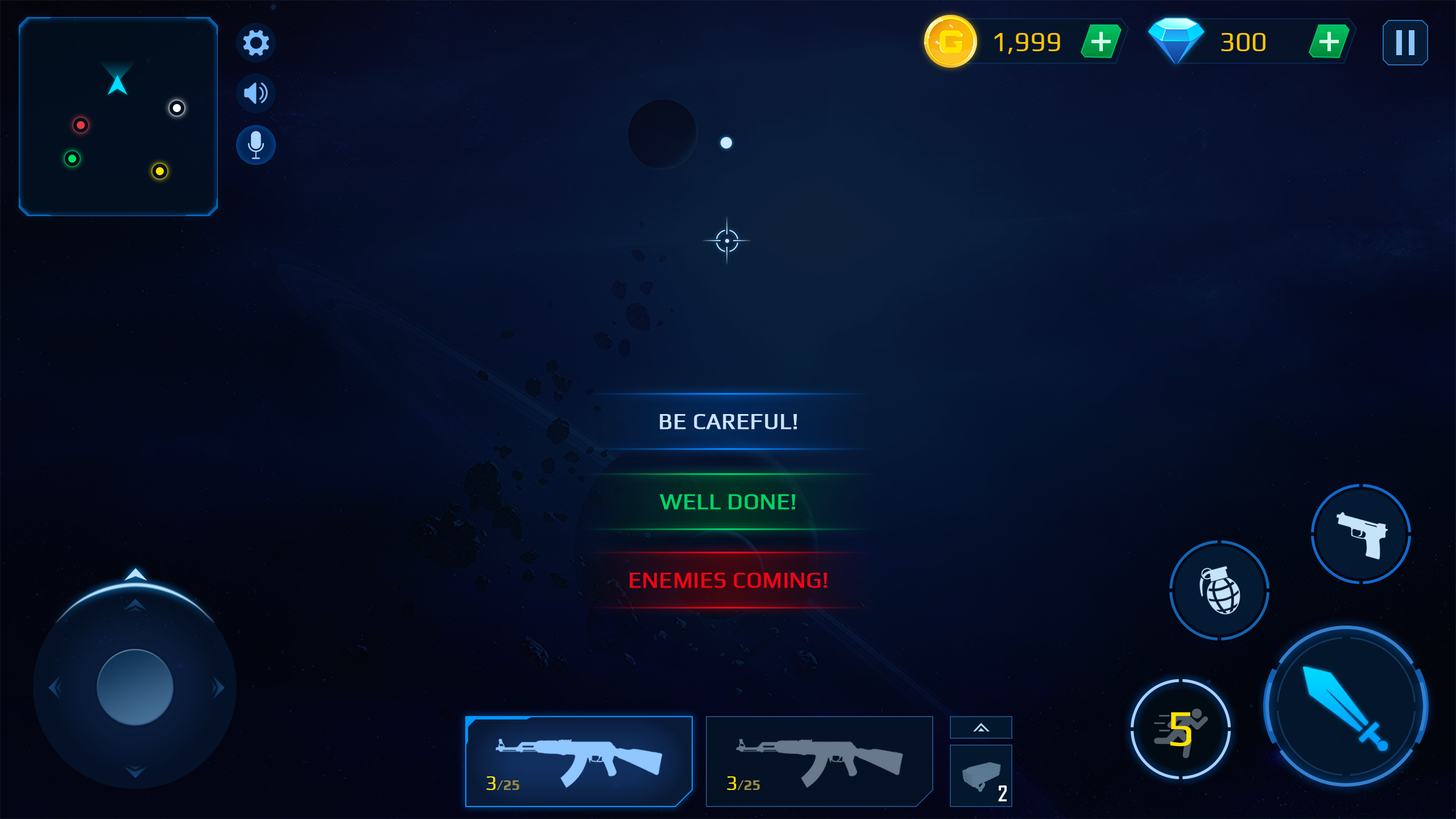
<style>
.page{position:relative;width:1456px;height:819px}
.page>*{position:absolute;margin:0}
.t1{font:27.3px "Play-Regular";color:#ffc600}
.t2{font:22.7px "Play-Regular";color:#cae4ff;font-weight:bold}
.t3{font:22.7px "Play-Regular";color:#00d467;text-transform:uppercase;font-weight:bold}
.t4{font:22.7px "Play-Regular";color:#eb0617;text-transform:uppercase;font-weight:bold}
.t5{font:51.2px "Play-Regular";color:#ffe400}
.t6{font:14.8px "Play-Bold";color:#958c43}
.t7{font:20.5px "Play-Regular";color:#ffe400}
.t8{font:20.5px "AgencyFB-Bold";color:#ffffff}
</style>
<div class="page">
<p class="t1" style="left:994px;top:33px;width:66px;height:21px">1,999</p>
<p class="t1" style="left:1221px;top:33px;width:44px;height:18px">300</p>
<p class="t2" style="left:660px;top:414px;width:137px;height:15px">BE CAREFUL!</p>
<p class="t3" style="left:660px;top:494px;width:136px;height:16px">WELL DONE!</p>
<p class="t4" style="left:630px;top:573px;width:198px;height:15px">Enemies Coming!</p>
<p class="t5" style="left:1170px;top:712px;width:22px;height:34px">5</p>
<p class="t6" style="left:486px;top:776px;width:33px;height:14px"><span class="t7">3</span>/25</p>
<p class="t6" style="left:727px;top:776px;width:33px;height:14px"><span class="t7">3</span>/25</p>
<p class="t8" style="left:998px;top:785px;width:9px;height:16px">2</p>
</div>
